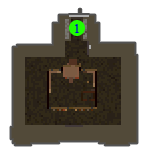
<style>
.page{position:relative;width:147px;height:157px;background:#ffffff}
.page>*{position:absolute;margin:0}
.t1{font:20px "TimesNewRomanPSMT";color:#0101dd}
</style>
<div class="page">
<p class="t1" style="left:75px;top:24px;width:4px;height:9px">1</p>
</div>
